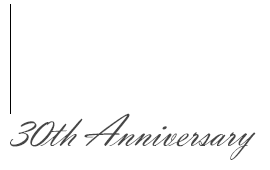
<style>
.page{position:relative;width:270px;height:170px;background:#ffffff}
.page>*{position:absolute;margin:0}
.t1{font:45px "VladimirScript";letter-spacing:-0.04em;color:#464646}
</style>
<div class="page">
<p class="t1" style="left:10px;top:113px;width:246px;height:47px">30th Anniversary</p>
</div>
